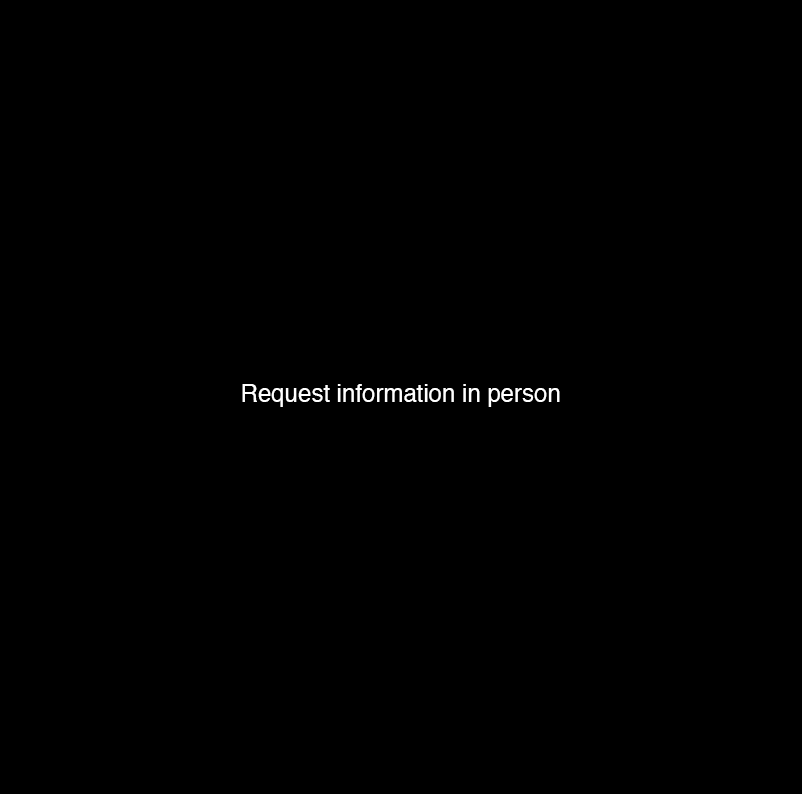
<style>
.page{position:relative;width:802px;height:794px;background:#000000}
.page>*{position:absolute;margin:0}
.t1{font:24px "Helvetica";color:#ffffff}
</style>
<div class="page">
<p class="t1" style="left:242px;top:384px;width:318px;height:23px">Request information in person</p>
</div>
